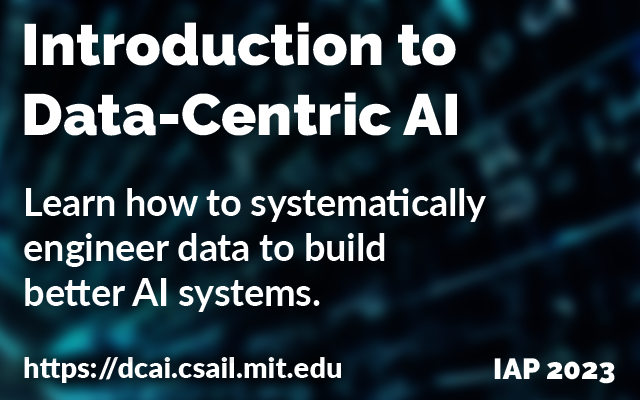
<style>
.page{position:relative;width:640px;height:400px}
.page>*{position:absolute;margin:0}
.t1{font:58.3px "Raleway-Black";color:#ffffff}
.t2{font:37.5px "Lato-Bold";color:#ffffff}
.t3{font:29.2px "Lato-Black";color:#ffffff}
.t4{font:29.2px "Raleway-Black";color:#ffffff}
</style>
<div class="page">
<p class="t1" style="left:24px;top:22px;width:433px;height:114px">Introduction to<br>Data-Centric AI</p>
<p class="t2" style="left:24px;top:188px;width:462px;height:124px">Learn how to systematically<br>engineer data to build<br>better AI systems.</p>
<p class="t3" style="left:24px;top:357px;width:317px;height:26px">https://dcai.csail.mit.edu</p>
<p class="t4" style="left:494px;top:358px;width:121px;height:26px">IAP 2023</p>
</div>
